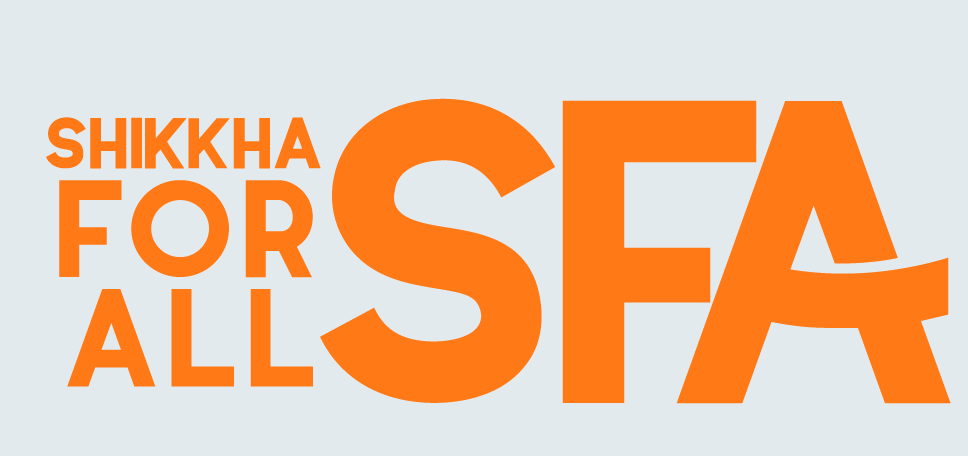
<style>
.page{position:relative;width:968px;height:456px;background:#e3eaee}
.page>*{position:absolute;margin:0}
.t1{font:432.1px "Coyote-SemiBoldDEMO";letter-spacing:-0.25em;color:#ff7916}
.t2{font:432.1px "Coyote-SemiBoldDEMO";letter-spacing:-0.33em;color:#ff7916}
.t3{font:432.1px "Coyote-SemiBoldDEMO";letter-spacing:-0.29em;color:#ff7916}
.t4{font:71.4px/109.4px "Coyote-SemiBoldDEMO";letter-spacing:-0.25em;color:#ff7916;font-weight:bold}
.t5{font:138.3px/109.4px "Coyote-SemiBoldDEMO";letter-spacing:-0.15em;color:#ff7916}
</style>
<div class="page">
<p class="t1" style="left:320px;top:98px;width:631px;height:306px">S<span class="t2">f</span><span class="t3">A</span></p>
<p class="t4" style="left:46px;top:117px;width:275px;height:270px;text-align:right">shikkha<br><span class="t5">for<br>all</span></p>
</div>
